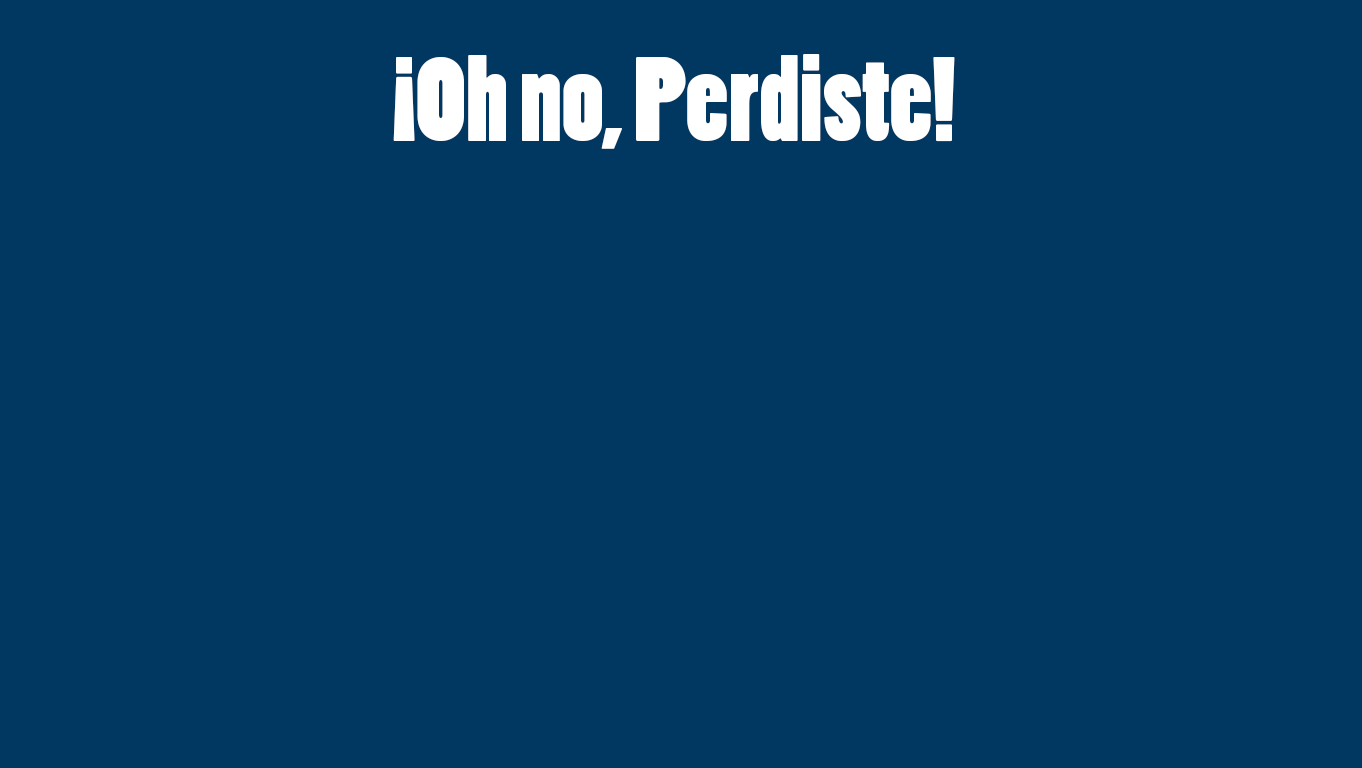
<style>
.page{position:relative;width:1362px;height:768px;background:#003862}
.page>*{position:absolute;margin:0}
.t1{font:112px "PoplarStd";color:#ffffff}
</style>
<div class="page">
<p class="t1" style="left:393px;top:54px;width:562px;height:95px">¡Oh no, Perdiste!</p>
</div>
